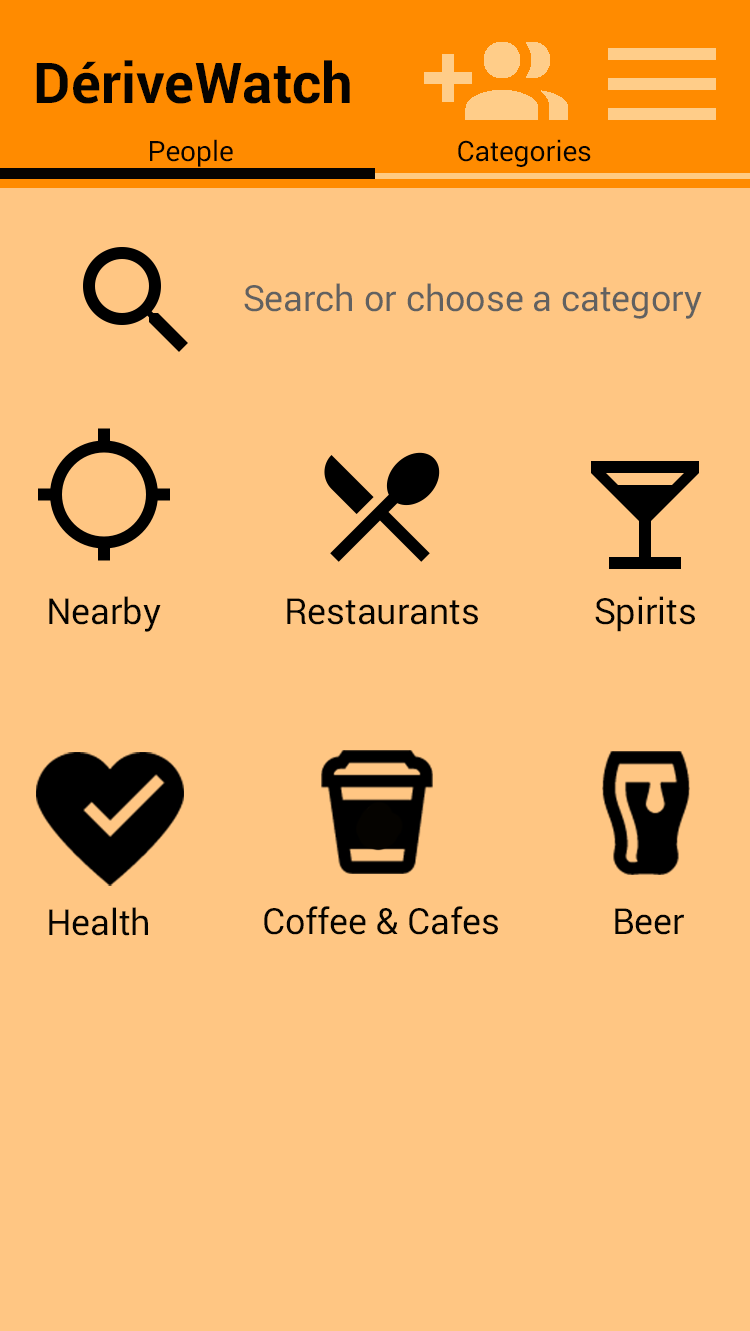
<style>
.page{position:relative;width:750px;height:1331px;background:#ffc683}
.page>*{position:absolute;margin:0}
.t1{font:56.2px "Roboto-Bold";color:#050300}
.t2{font:28.1px "Roboto-Black";color:#050300}
.t3{font:36px "Roboto-Black";color:#616161}
.t4{font:36px "Roboto-Black";color:#050300}
</style>
<div class="page">
<p class="t1" style="left:36px;top:60px;width:314px;height:44px">DériveWatch</p>
<p class="t2" style="left:150px;top:139px;width:83px;height:28px">People</p>
<p class="t2" style="left:458px;top:139px;width:133px;height:28px">Categories</p>
<p class="t3" style="left:244px;top:283px;width:458px;height:36px">Search or choose a category</p>
<p class="t4" style="left:49px;top:596px;width:112px;height:36px">Nearby</p>
<p class="t4" style="left:287px;top:598px;width:191px;height:27px">Restaurants</p>
<p class="t4" style="left:595px;top:596px;width:100px;height:36px">Spirits</p>
<p class="t4" style="left:49px;top:907px;width:99px;height:29px">Health</p>
<p class="t4" style="left:264px;top:906px;width:234px;height:29px">Coffee &amp; Cafes</p>
<p class="t4" style="left:615px;top:908px;width:69px;height:27px">Beer</p>
</div>
